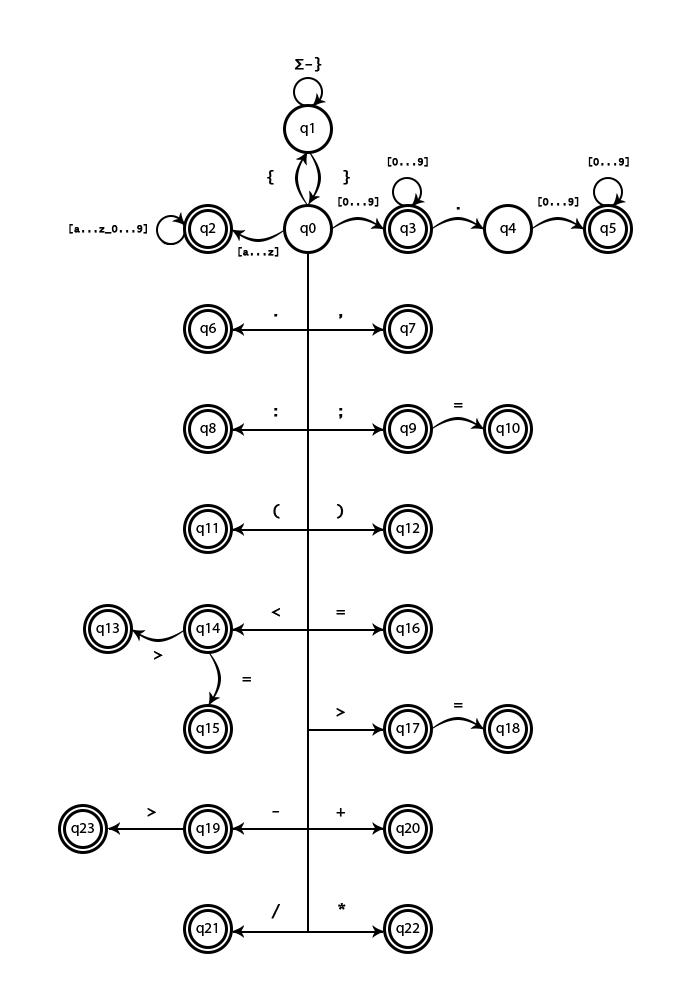
<style>
.page{position:relative;width:700px;height:1000px;background:#ffffff}
.page>*{position:absolute;margin:0}
.t1{font:15px "LucidaConsole";color:#000000;font-weight:bold}
.t2{font:15px "MyriadPro-Regular";color:#000000}
.t3{font:10px "LucidaConsole";color:#000000;font-weight:bold}
</style>
<div class="page">
<p class="t1" style="left:294px;top:57px;width:28px;height:15px">Σ-}</p>
<p class="t2" style="left:300px;top:123px;width:14px;height:13px">q1</p>
<p class="t3" style="left:387px;top:157px;width:41px;height:10px">[0...9]</p>
<p class="t3" style="left:588px;top:157px;width:41px;height:10px">[0...9]</p>
<p class="t1" style="left:267px;top:170px;width:7px;height:15px">{</p>
<p class="t1" style="left:343px;top:170px;width:7px;height:15px">}</p>
<p class="t3" style="left:338px;top:197px;width:41px;height:10px">[0...9]</p>
<p class="t3" style="left:538px;top:197px;width:41px;height:10px">[0...9]</p>
<p class="t1" style="left:456px;top:207px;width:4px;height:3px">.</p>
<p class="t3" style="left:69px;top:224px;width:78px;height:10px">[a...z_0...9]</p>
<p class="t2" style="left:200px;top:223px;width:16px;height:13px">q2</p>
<p class="t2" style="left:300px;top:223px;width:16px;height:13px">q0</p>
<p class="t2" style="left:400px;top:223px;width:16px;height:13px">q3</p>
<p class="t2" style="left:500px;top:223px;width:16px;height:13px">q4</p>
<p class="t2" style="left:600px;top:223px;width:16px;height:13px">q5</p>
<p class="t3" style="left:238px;top:247px;width:41px;height:10px">[a...z]</p>
<p class="t1" style="left:274px;top:314px;width:4px;height:3px">.</p>
<p class="t1" style="left:339px;top:314px;width:4px;height:5px">,</p>
<p class="t2" style="left:200px;top:323px;width:16px;height:13px">q6</p>
<p class="t2" style="left:400px;top:323px;width:16px;height:13px">q7</p>
<p class="t1" style="left:274px;top:408px;width:4px;height:9px">:</p>
<p class="t1" style="left:339px;top:408px;width:4px;height:11px">;</p>
<p class="t1" style="left:454px;top:403px;width:9px;height:5px">=</p>
<p class="t2" style="left:200px;top:423px;width:16px;height:13px">q8</p>
<p class="t2" style="left:400px;top:423px;width:16px;height:13px">q9</p>
<p class="t2" style="left:496px;top:423px;width:24px;height:13px">q10</p>
<p class="t1" style="left:273px;top:504px;width:7px;height:15px">(</p>
<p class="t1" style="left:337px;top:504px;width:7px;height:15px">)</p>
<p class="t2" style="left:196px;top:523px;width:21px;height:13px">q11</p>
<p class="t2" style="left:396px;top:523px;width:24px;height:13px">q12</p>
<p class="t1" style="left:271px;top:608px;width:9px;height:9px">&lt;</p>
<p class="t1" style="left:336px;top:610px;width:9px;height:5px">=</p>
<p class="t2" style="left:96px;top:623px;width:23px;height:13px">q13</p>
<p class="t2" style="left:196px;top:623px;width:24px;height:13px">q14</p>
<p class="t2" style="left:396px;top:623px;width:24px;height:13px">q16</p>
<p class="t1" style="left:154px;top:651px;width:9px;height:9px">&gt;</p>
<p class="t1" style="left:242px;top:677px;width:9px;height:5px">=</p>
<p class="t1" style="left:336px;top:708px;width:9px;height:9px">&gt;</p>
<p class="t1" style="left:454px;top:703px;width:9px;height:5px">=</p>
<p class="t2" style="left:196px;top:723px;width:23px;height:13px">q15</p>
<p class="t2" style="left:396px;top:723px;width:24px;height:13px">q17</p>
<p class="t2" style="left:496px;top:723px;width:24px;height:13px">q18</p>
<p class="t1" style="left:147px;top:808px;width:9px;height:9px">&gt;</p>
<p class="t1" style="left:336px;top:808px;width:9px;height:9px">+</p>
<p class="t1" style="left:272px;top:811px;width:8px;height:2px">-</p>
<p class="t2" style="left:71px;top:823px;width:23px;height:13px">q23</p>
<p class="t2" style="left:196px;top:823px;width:24px;height:13px">q19</p>
<p class="t2" style="left:396px;top:823px;width:24px;height:13px">q20</p>
<p class="t1" style="left:271px;top:904px;width:9px;height:15px">/</p>
<p class="t1" style="left:338px;top:903px;width:8px;height:7px">*</p>
<p class="t2" style="left:196px;top:923px;width:21px;height:13px">q21</p>
<p class="t2" style="left:396px;top:923px;width:24px;height:13px">q22</p>
</div>
